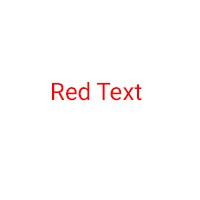
<style>
.page{position:relative;width:200px;height:200px;background:#ffffff}
.page>*{position:absolute;margin:0}
.t1{font:24px "Roboto-Regular";color:#ff0000}
</style>
<div class="page">
<p class="t1" style="left:52px;top:82px;width:90px;height:19px">Red Text</p>
</div>
